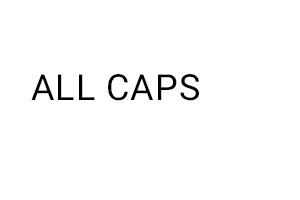
<style>
.page{position:relative;width:300px;height:200px;background:#ffffff}
.page>*{position:absolute;margin:0}
.t1{font:36px "Roboto-Regular";color:#000000;text-transform:uppercase}
</style>
<div class="page">
<p class="t1" style="left:31px;top:74px;width:168px;height:27px">all caps</p>
</div>
